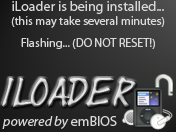
<style>
.page{position:relative;width:176px;height:132px}
.page>*{position:absolute;margin:0}
.t1{font:12px "MyriadPro-Regular";color:#d8d8d8}
.t2{font:14px "MyriadPro-Regular";color:#d8d8d8}
.t3{font:30px "Yearsupplyoffairycakes"}
.t4{font:14px "MyriadPro-It";color:#d8d8d8}
</style>
<div class="page">
<p class="t1" style="left:11px;top:1px;width:154px;height:48px;text-align:center"><span class="t2">iLoader is being installed...<br></span>(this may take several minutes)<br><br>Flashing... (DO NOT RESET!)</p>
<p class="t3" style="left:2px;top:78px;width:134px;height:29px">iLoader</p>
<p class="t4" style="left:2px;top:116px;width:115px;height:13px">powered by<span class="t2"> emBIOS</span></p>
</div>
